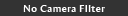
<style>
.page{position:relative;width:128px;height:16px;background:#333333}
.page>*{position:absolute;margin:0}
.t1{font:10px "AmiraParadiso";letter-spacing:0.05em;color:#ffffff}
</style>
<div class="page">
<p class="t1" style="left:23px;top:5px;width:82px;height:7px">No Camera FIlter</p>
</div>
